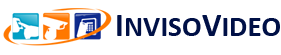
<style>
.page{position:relative;width:281px;height:55px;background:#ffffff}
.page>*{position:absolute;margin:0}
.t1{font:29.2px "Calibri-Bold";color:#001046}
.t2{font:33.3px "Calibri-Bold";color:#001046}
</style>
<div class="page">
<p class="t1" style="left:117px;top:15px;width:163px;height:21px"><span class="t2">I</span>NVISO<span class="t2">V</span>IDEO</p>
</div>
